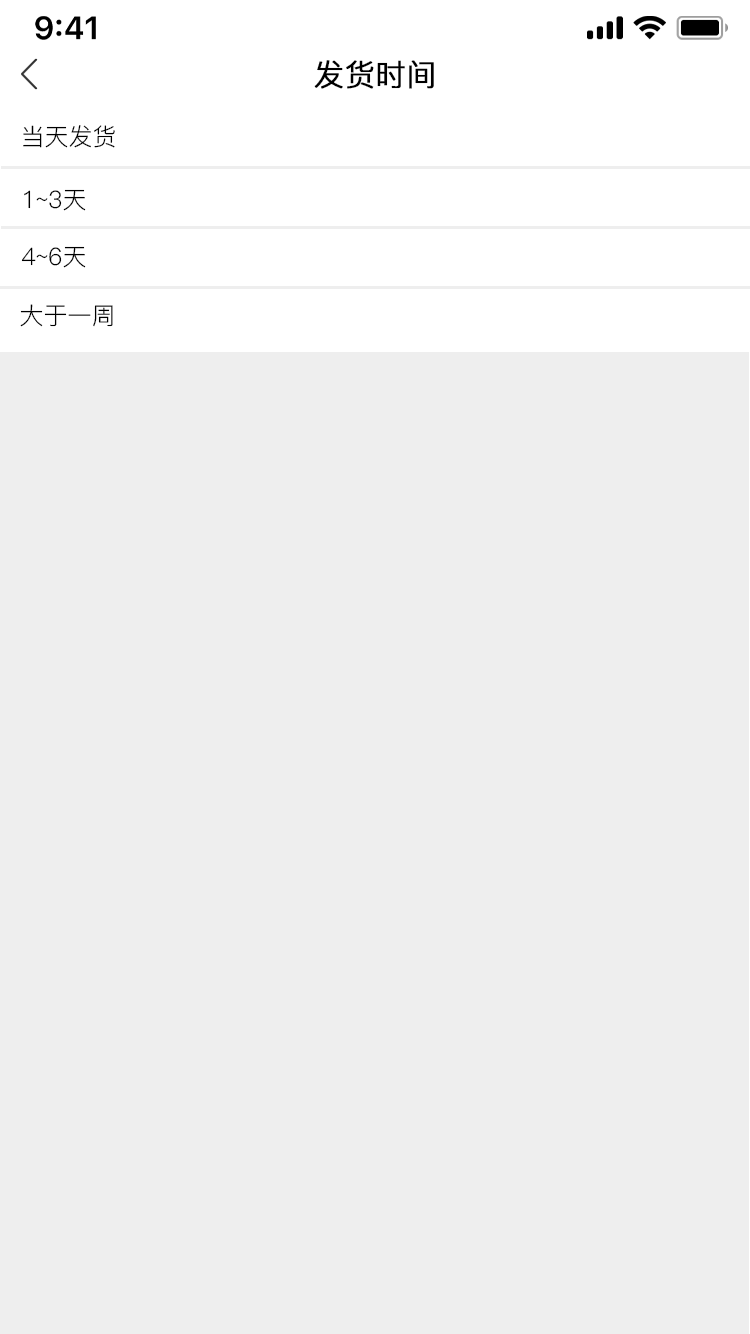
<style>
.page{position:relative;width:750px;height:1334px;background:#eeeeee}
.page>*{position:absolute;margin:0}
.t1{font:30px "PingFang-SC-Regular";color:#000000;font-weight:bold}
.t2{font:24px "PingFang-SC-Regular";color:#000000}
</style>
<div class="page">
<p class="t1" style="left:314px;top:60px;width:120px;height:29px">发货时间</p>
<p class="t2" style="left:23px;top:125px;width:92px;height:23px">当天发货</p>
<p class="t2" style="left:24px;top:189px;width:62px;height:22px">1~3天</p>
<p class="t2" style="left:21px;top:246px;width:65px;height:22px">4~6天</p>
<p class="t2" style="left:20px;top:304px;width:93px;height:23px">大于一周</p>
</div>
